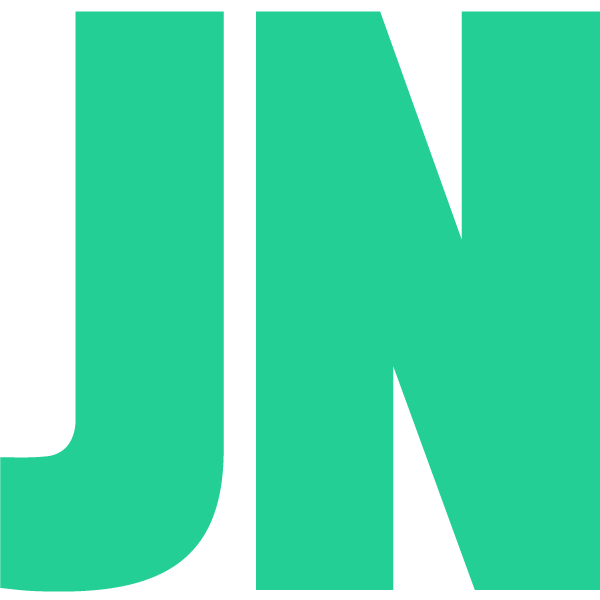
<style>
.page{position:relative;width:600px;height:600px;background:#23cf95}
.page>*{position:absolute;margin:0}
.t1{font:724.7px "TitlingGothicFBComp-Bold";color:#23cf95}
</style>
<div class="page">
<p class="t1" style="left:0px;top:11px;width:601px;height:581px">JN</p>
</div>
